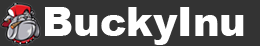
<style>
.page{position:relative;width:260px;height:46px;background:#333333}
.page>*{position:absolute;margin:0}
.t1{font:39.9px "Arial-Black";color:#ffffff}
</style>
<div class="page">
<p class="t1" style="left:45px;top:7px;width:199px;height:38px">BuckyInu</p>
</div>
